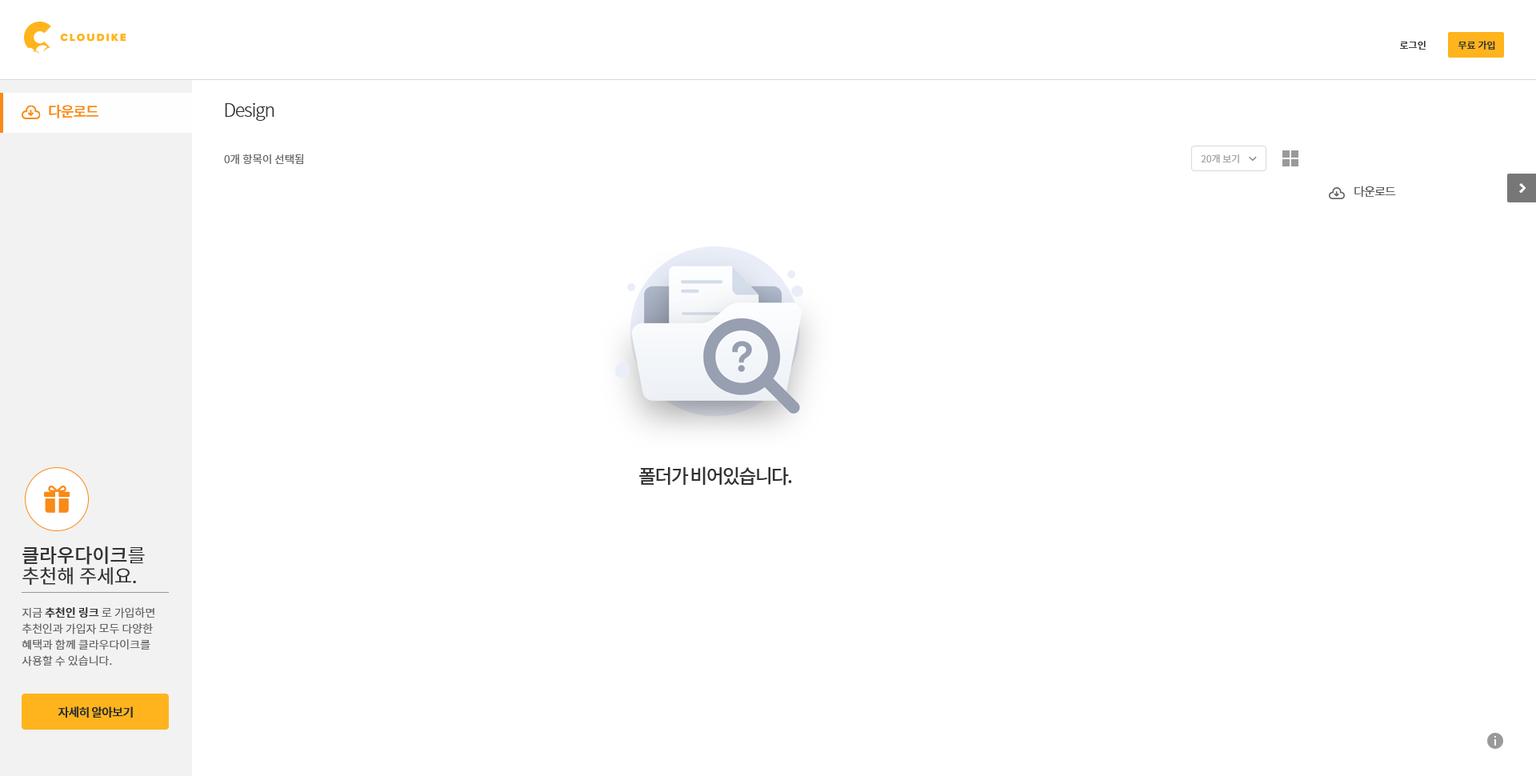
<style>
.page{position:relative;width:1536px;height:776px;background:#ffffff}
.page>*{position:absolute;margin:0}
.t1{font:9.6px "NotoSansCJKkr-Medium";color:#333333}
.t2{font:14.4px "NotoSansCJKkr-Medium";letter-spacing:-0.05em;color:#f98a17}
.t3{font:18.4px "NotoSansCJKkr-Light";letter-spacing:-0.05em;color:#333333}
.t4{font:10.8px "NotoSansCJKkr-DemiLight";color:#666666}
.t5{font:9.6px "NotoSansCJKkr-DemiLight";color:#a1a1a1}
.t6{font:12px "NotoSansCJKkr-Light";letter-spacing:-0.05em;color:#333333}
.t7{font:19.2px "NotoSansCJKkr-Medium";letter-spacing:-0.075em;color:#333333}
.t8{font:19.2px/20.8px "NotoSansCJKkr-DemiLight";color:#333333}
.t9{font:19.2px/20.8px "NotoSansCJKkr-Medium";color:#333333}
.t10{font:11.2px/16px "NotoSansCJKkr-DemiLight";color:#666666}
.t11{font:11.2px/16px "NotoSansCJKkr-Medium";color:#333333}
.t12{font:12px "NotoSansCJKkr-Medium";letter-spacing:-0.05em;color:#2d2d2d}
</style>
<div class="page">
<p class="t1" style="left:1400px;top:41px;width:26px;height:9px">로그인</p>
<p class="t1" style="left:1459px;top:41px;width:37px;height:9px">무료 가입</p>
<p class="t2" style="left:49px;top:104px;width:49px;height:14px">다운로드</p>
<p class="t3" style="left:225px;top:102px;width:49px;height:19px">Design</p>
<p class="t4" style="left:224px;top:154px;width:79px;height:11px">0개 항목이 선택됨</p>
<p class="t5" style="left:1201px;top:154px;width:38px;height:9px">20개 보기</p>
<p class="t6" style="left:1355px;top:186px;width:41px;height:11px">다운로드</p>
<p class="t7" style="left:639px;top:466px;width:153px;height:20px">폴더가 비어있습니다.</p>
<p class="t8" style="left:22px;top:547px;width:123px;height:38px"><span class="t9">클라우다이크</span>를 <br>추천해 주세요.</p>
<p class="t10" style="left:22px;top:607px;width:132px;height:60px">지금 <span class="t11">추천인 링크</span> 로 가입하면<br>추천인과 가입자 모두 다양한 <br>혜택과 함께 클라우다이크를 <br>사용할 수 있습니다.</p>
<p class="t12" style="left:58px;top:707px;width:75px;height:12px">자세히 알아보기</p>
</div>
